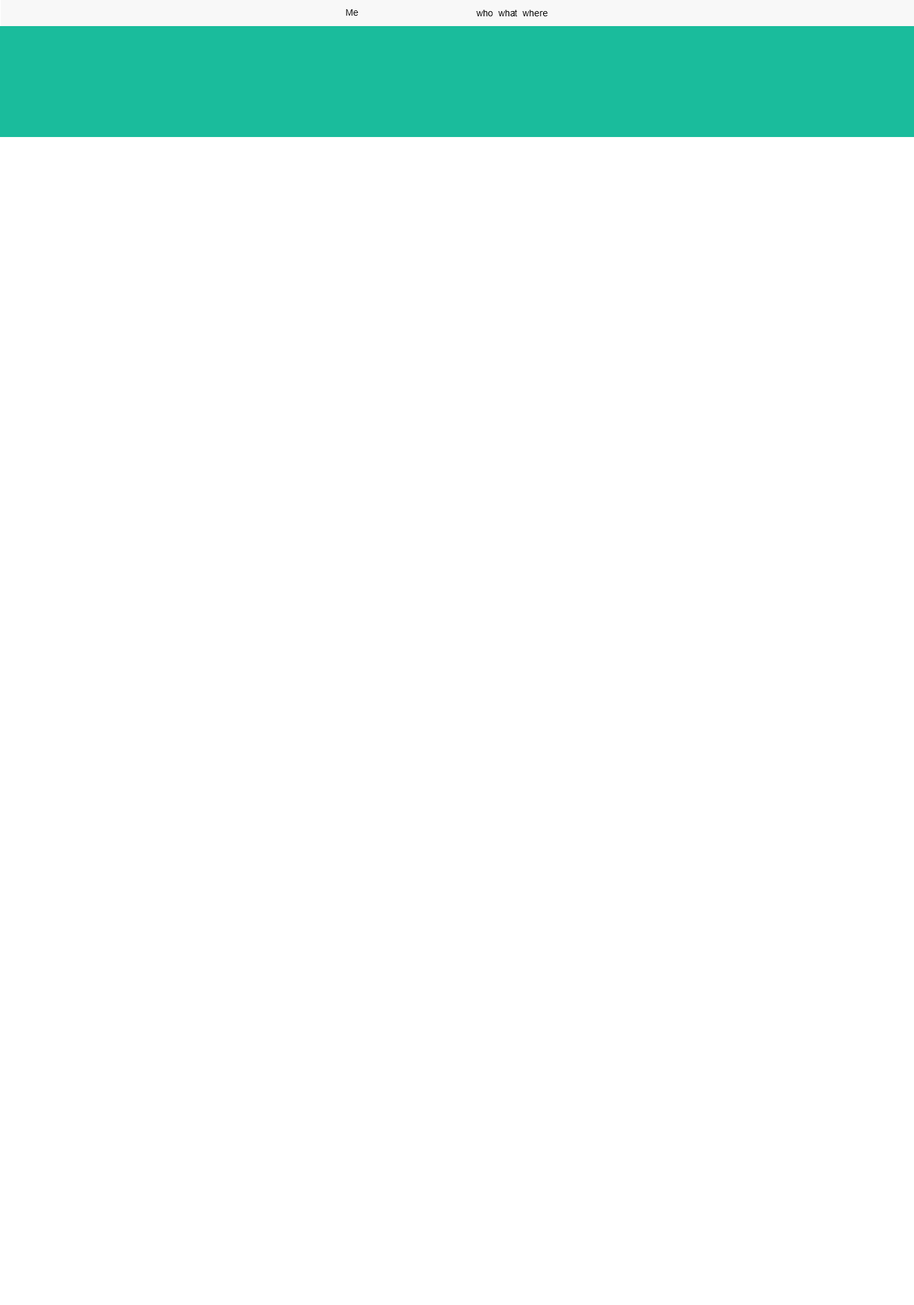
<style>
.page{position:relative;width:914px;height:1305px;background:#ffffff}
.page>*{position:absolute;margin:0}
.t1{font:9.1px "ArialMT";color:#000000}
</style>
<div class="page">
<p class="t1" style="left:346px;top:9px;width:12px;height:7px">Me</p>
<p class="t1" style="left:476px;top:10px;width:72px;height:6px">who  what  where</p>
</div>
